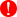
<style>
.page{position:relative;width:17px;height:17px;background:#ff0000}
.page>*{position:absolute;margin:0}
.t1{font:30px "KodchiangUPC";color:#ffffff}
</style>
<div class="page">
<p class="t1" style="left:7px;top:2px;width:3px;height:13px">!</p>
</div>
